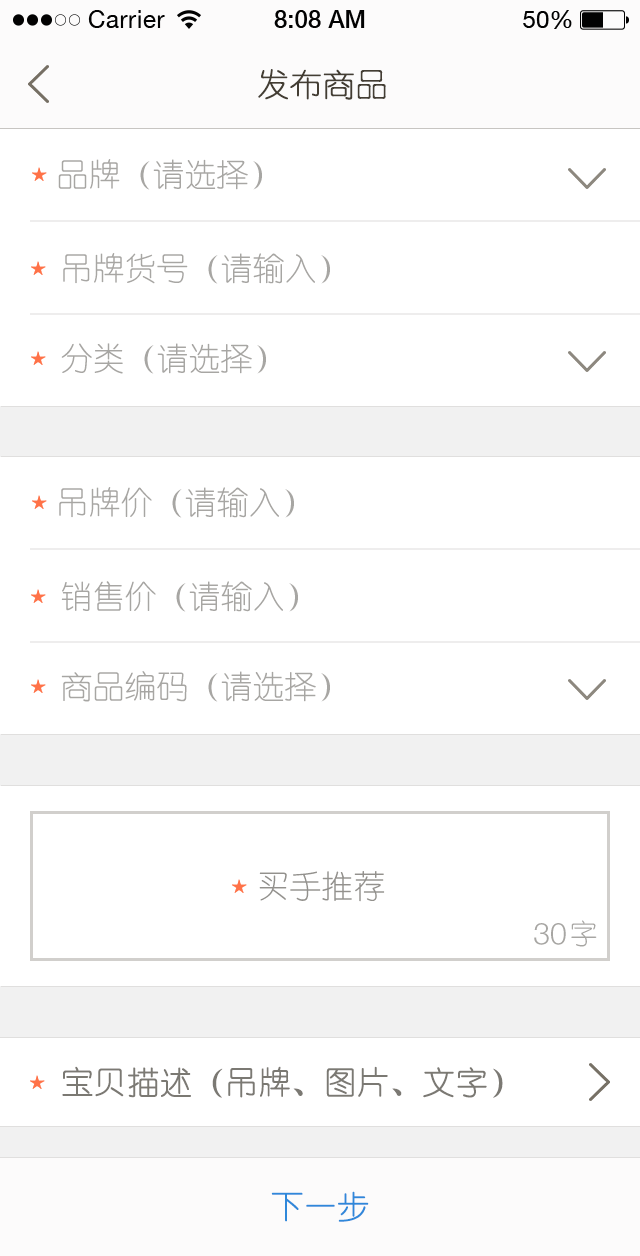
<style>
.page{position:relative;width:640px;height:1256px;background:#ffffff}
.page>*{position:absolute;margin:0}
.t1{font:32px "YouYuan";color:#433d33;text-transform:uppercase;font-weight:bold}
.t2{font:32px "YouYuan";color:#a7a6a3;text-transform:uppercase}
.t3{font:32px "YouYuan";color:#93918d;text-transform:uppercase}
.t4{font:30px "HelveticaNeueLTPro-Lt";color:#a7a6a3;text-transform:uppercase}
.t5{font:28px "YouYuan";color:#a7a6a3;text-transform:uppercase}
.t6{font:32px "YouYuan";color:#7b7973;text-transform:uppercase;font-weight:bold}
.t7{font:32px "YouYuan";color:#2f88da;text-transform:uppercase;font-weight:bold}
</style>
<div class="page">
<p class="t1" style="left:258px;top:69px;width:128px;height:31px">发布商品</p>
<p class="t2" style="left:58px;top:159px;width:204px;height:31px">品牌（请选择）</p>
<p class="t2" style="left:63px;top:253px;width:267px;height:31px">吊牌货号（请输入）</p>
<p class="t2" style="left:61px;top:343px;width:205px;height:31px">分类（请选择）</p>
<p class="t2" style="left:59px;top:487px;width:235px;height:31px">吊牌价（请输入）</p>
<p class="t2" style="left:61px;top:581px;width:237px;height:31px">销售价（请输入）</p>
<p class="t2" style="left:61px;top:671px;width:269px;height:31px">商品编码（请选择）</p>
<p class="t3" style="left:259px;top:871px;width:126px;height:31px">买手推荐</p>
<p class="t4" style="left:534px;top:923px;width:32px;height:22px">30</p>
<p class="t5" style="left:571px;top:920px;width:26px;height:27px">字</p>
<p class="t6" style="left:62px;top:1066px;width:441px;height:32px">宝贝描述（吊牌、图片、文字）</p>
<p class="t7" style="left:271px;top:1191px;width:98px;height:31px">下一步</p>
</div>
